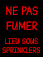
<style>
.page{position:relative;width:43px;height:57px;background:#000000}
.page>*{position:absolute;margin:0}
.t1{font:12px "212BabyGirl";color:#fb0000}
.t2{font:8px "212BabyGirl";color:#fb0000}
</style>
<div class="page">
<p class="t1" style="left:6px;top:6px;width:32px;height:25px;text-align:center">NE PAS<br>FUMER</p>
<p class="t2" style="left:2px;top:38px;width:38px;height:15px;text-align:center">LIEU SOUS<br>SPRINKLERS</p>
</div>
